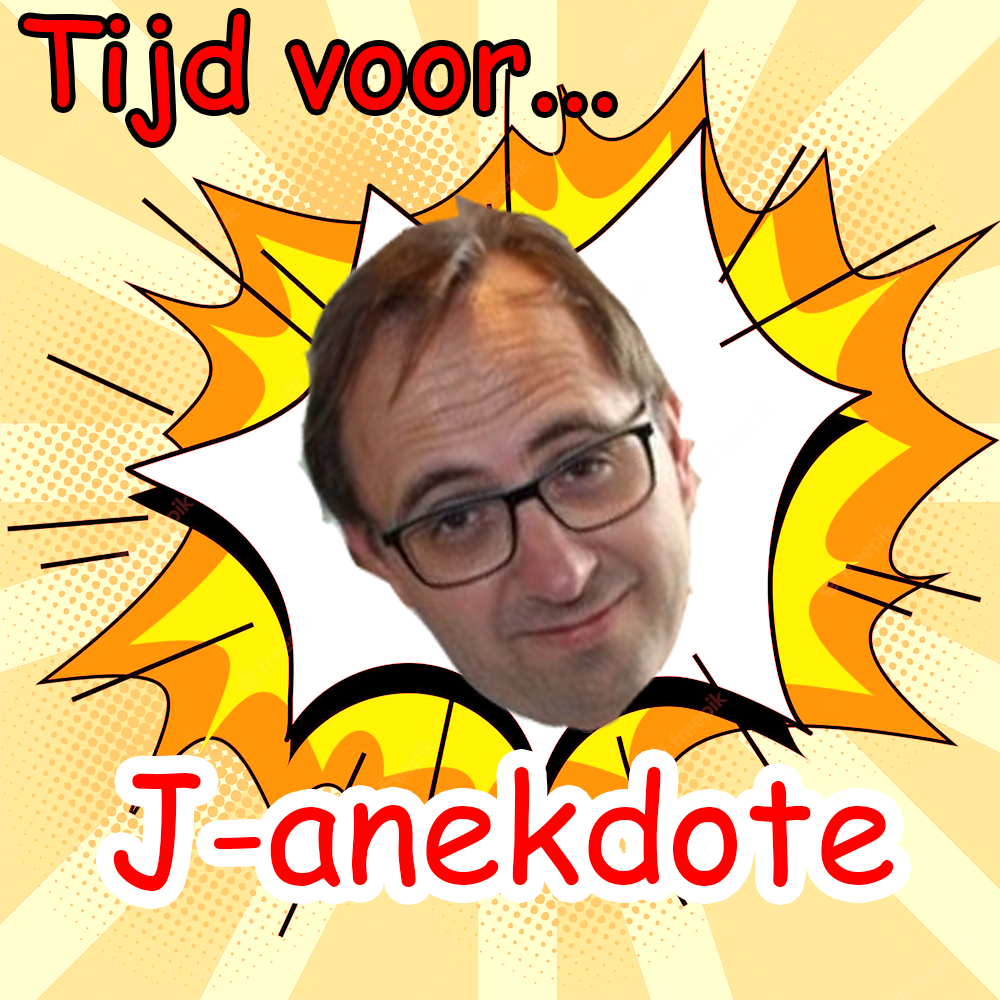
<style>
.page{position:relative;width:1000px;height:1000px}
.page>*{position:absolute;margin:0}
.t1{font:120px "ComicSansMS";color:#ff0000}
.t2{font:147.7px "ComicSansMS";color:#ff0000}
</style>
<div class="page">
<p class="t1" style="left:23px;top:14px;width:589px;height:128px">Tijd voor...</p>
<p class="t2" style="left:113px;top:767px;width:781px;height:124px">J-anekdote</p>
</div>
